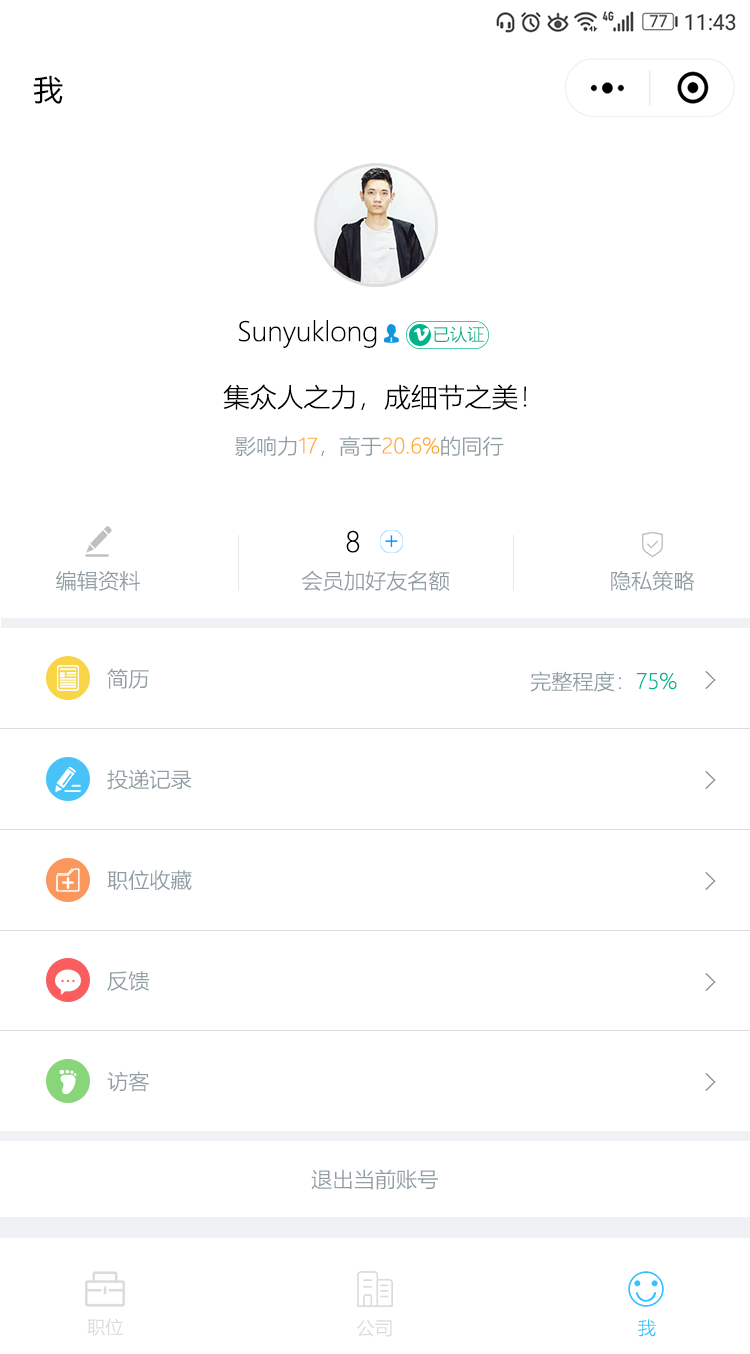
<style>
.page{position:relative;width:750px;height:1354px;background:#ffffff}
.page>*{position:absolute;margin:0}
.t1{font:29.2px "MicrosoftYaHei";color:#010101}
.t2{font:26.3px "MicrosoftYaHeiLight";color:#000000}
.t3{font:17.4px "MicrosoftYaHeiLight";color:#00b38a}
.t4{font:20.8px "MicrosoftYaHeiLight";color:#ffa92f}
.t5{font:20.8px "MicrosoftYaHeiLight";color:#909da3}
.t6{font:27.8px "MicrosoftYaHeiLight";color:#000000}
.t7{font:20.8px "MicrosoftYaHeiLight";color:#00b38a}
.t8{font:18.1px "MicrosoftYaHeiLight";color:#dbdbdb}
.t9{font:18.1px "MicrosoftYaHeiLight";color:#32c2ff}
</style>
<div class="page">
<p class="t1" style="left:33px;top:75px;width:30px;height:29px">我</p>
<p class="t2" style="left:239px;top:320px;width:138px;height:28px">Sunyuklong</p>
<p class="t3" style="left:434px;top:326px;width:51px;height:17px">已认证</p>
<p class="t2" style="left:223px;top:384px;width:304px;height:26px">集众人之力，成细节之美！</p>
<p class="t4" style="left:235px;top:436px;width:269px;height:21px"><span class="t5">影响力</span>17<span class="t5">，高于</span>20.6%<span class="t5">的同行</span></p>
<p class="t6" style="left:346px;top:530px;width:14px;height:23px">8</p>
<p class="t5" style="left:56px;top:570px;width:84px;height:21px">编辑资料</p>
<p class="t5" style="left:301px;top:570px;width:149px;height:21px">会员加好友名额</p>
<p class="t5" style="left:611px;top:570px;width:84px;height:21px">隐私策略</p>
<p class="t5" style="left:107px;top:668px;width:42px;height:21px">简历</p>
<p class="t5" style="left:530px;top:671px;width:147px;height:21px">完整程度：<span class="t7">75%</span></p>
<p class="t5" style="left:107px;top:769px;width:85px;height:21px">投递记录</p>
<p class="t5" style="left:107px;top:870px;width:85px;height:20px">职位收藏</p>
<p class="t5" style="left:107px;top:971px;width:42px;height:20px">反馈</p>
<p class="t5" style="left:107px;top:1071px;width:42px;height:21px">访客</p>
<p class="t5" style="left:311px;top:1169px;width:127px;height:21px">退出当前账号</p>
<p class="t8" style="left:87px;top:1318px;width:36px;height:18px">职位</p>
<p class="t8" style="left:357px;top:1320px;width:35px;height:17px">公司</p>
<p class="t9" style="left:638px;top:1319px;width:18px;height:18px">我</p>
</div>
